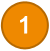
<style>
.page{position:relative;width:50px;height:51px;background:#ef8900}
.page>*{position:absolute;margin:0}
.t1{font:24px "ArialMT";color:#ffffff;font-weight:bold}
</style>
<div class="page">
<p class="t1" style="left:20px;top:16px;width:8px;height:18px">1</p>
</div>
